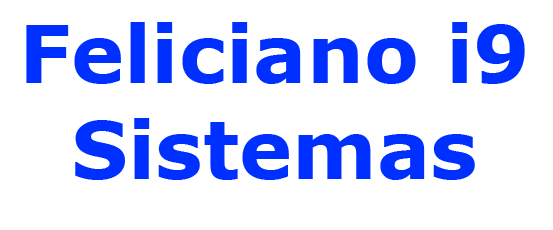
<style>
.page{position:relative;width:553px;height:230px;background:#ffffff}
.page>*{position:absolute;margin:0}
.t1{font:80px "Verdana-Bold";color:#0030ff}
</style>
<div class="page">
<p class="t1" style="left:26px;top:22px;width:499px;height:158px;text-align:center">Feliciano i9 <br>Sistemas</p>
</div>
